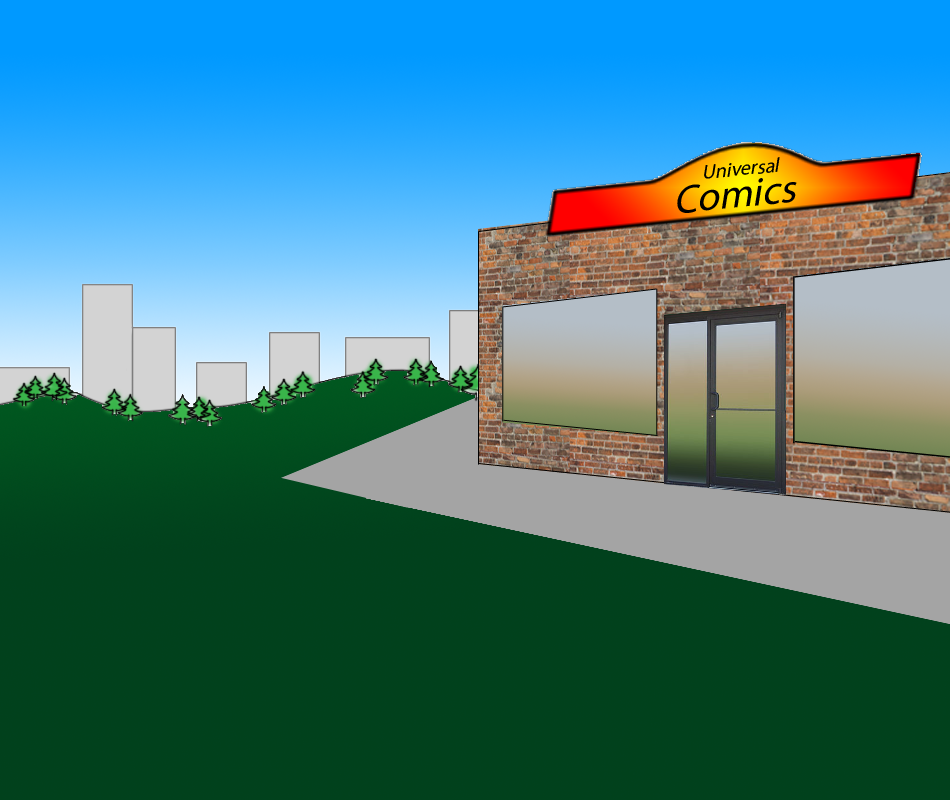
<style>
.page{position:relative;width:950px;height:800px;background:#01411c}
.page>*{position:absolute;margin:0}
.t1{font:20.6px "MyriadPro-Regular";color:#000000}
.t2{font:41.2px "MyriadPro-Regular";color:#000000}
</style>
<div class="page">
<p class="t1" style="left:704px;top:157px;width:76px;height:22px;rotate:-6deg">Universal</p>
<p class="t2" style="left:677px;top:178px;width:120px;height:35px;rotate:-6deg">Comics</p>
</div>
